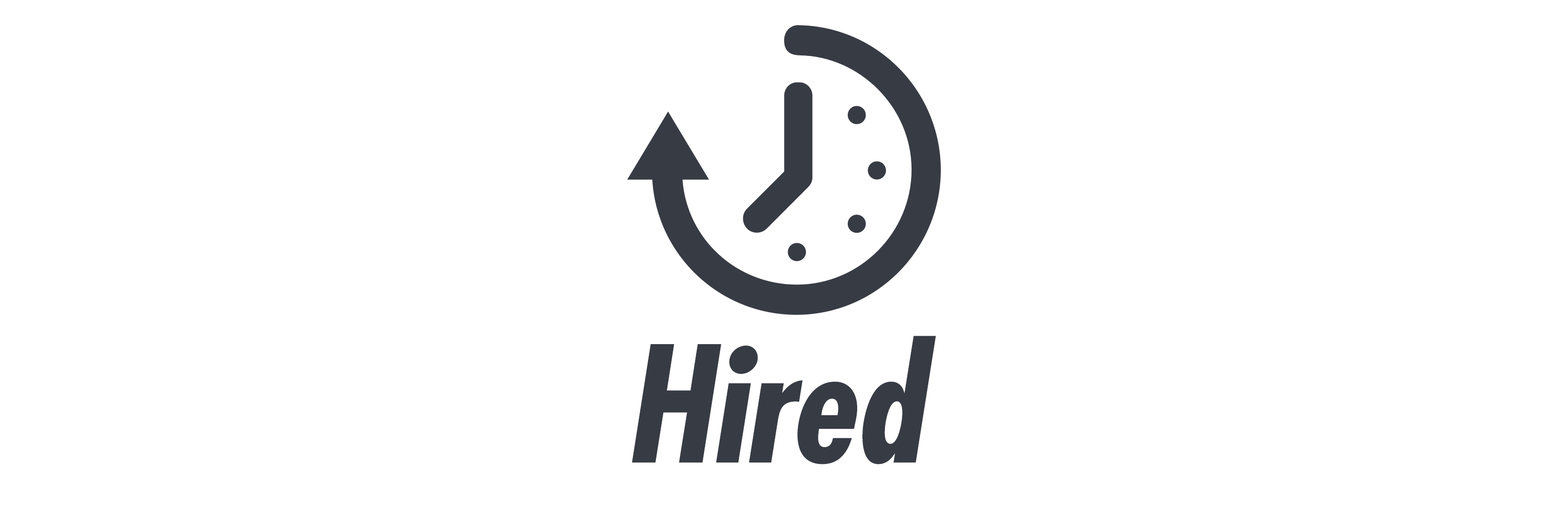
<style>
.page{position:relative;width:1568px;height:523px;background:#ffffff}
.page>*{position:absolute;margin:0}
.t1{font:156.8px "FuturaStd-CondensedBoldObl";color:#373b44}
</style>
<div class="page">
<p class="t1" style="left:632px;top:336px;width:304px;height:128px">Hired</p>
</div>
